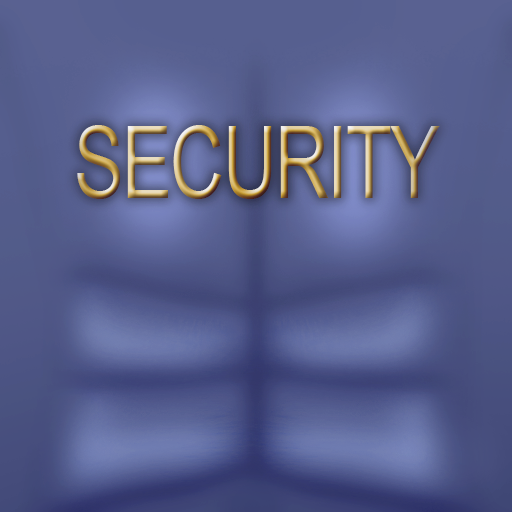
<style>
.page{position:relative;width:512px;height:512px}
.page>*{position:absolute;margin:0}
.t1{font:100px "ArialMT";letter-spacing:-0.025em;scale:0.75 1}
</style>
<div class="page">
<p class="t1" style="left:77px;top:125px;width:363px;height:74px">SECURITY</p>
</div>
